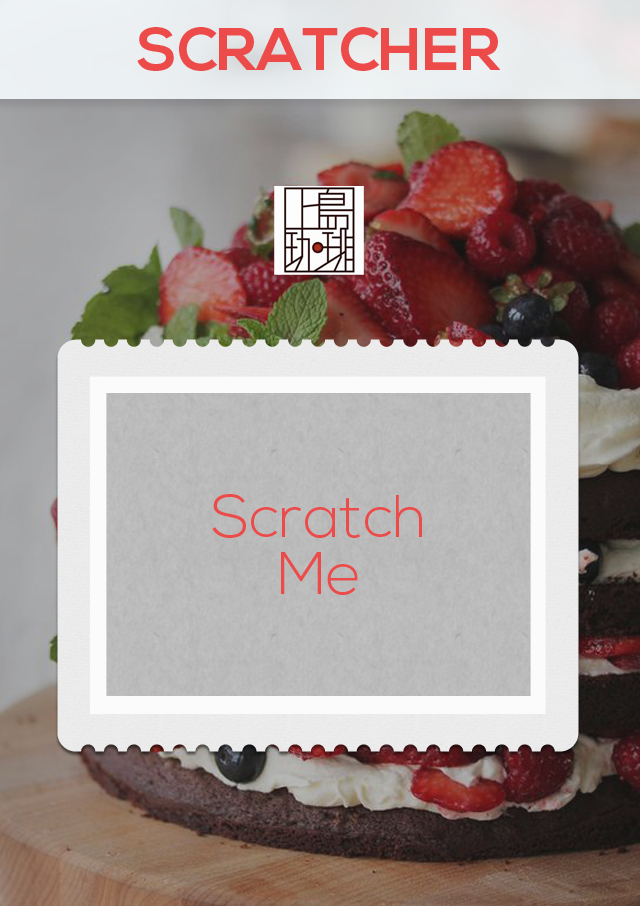
<style>
.page{position:relative;width:640px;height:906px}
.page>*{position:absolute;margin:0}
.t1{font:60px "NexaBold";color:#ed4a4a}
.t2{font:60px/56.4px "NexaLight";color:#ed4a4a}
</style>
<div class="page">
<p class="t1" style="left:137px;top:27px;width:363px;height:44px">SCRATCHER</p>
<p class="t2" style="left:212px;top:494px;width:210px;height:101px;text-align:center">Scratch<br>Me</p>
</div>
